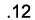
<style>
.page{position:relative;width:35px;height:20px;background:#ffffff}
.page>*{position:absolute;margin:0}
.t1{font:18px "ArialMT";color:#000000}
</style>
<div class="page">
<p class="t1" style="left:7px;top:4px;width:24px;height:14px">.12</p>
</div>
